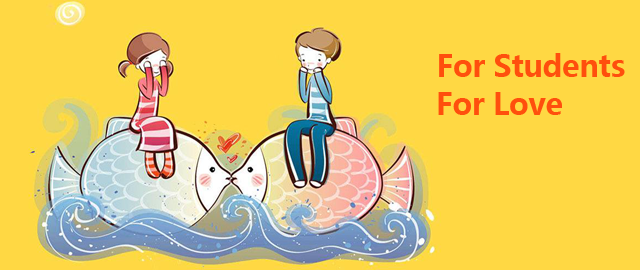
<style>
.page{position:relative;width:640px;height:270px;background:#ffd843}
.page>*{position:absolute;margin:0}
.t1{font:30px "MicrosoftYaHei";letter-spacing:-0.01em;color:#ff4f0d}
</style>
<div class="page">
<p class="t1" style="left:439px;top:53px;width:186px;height:24px">For Students</p>
<p class="t1" style="left:438px;top:92px;width:124px;height:23px">For Love</p>
</div>
